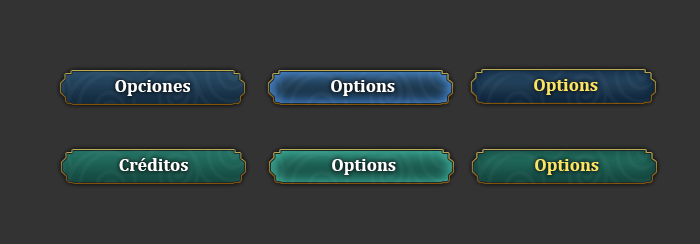
<style>
.page{position:relative;width:700px;height:244px;background:#333333}
.page>*{position:absolute;margin:0}
.t1{font:18px "Cambria-Bold";color:#ffffff}
.t2{font:18px "Cambria-Bold";color:#fbe463}
</style>
<div class="page">
<p class="t1" style="left:115px;top:80px;width:75px;height:16px">Opciones</p>
<p class="t1" style="left:331px;top:80px;width:64px;height:16px">Options</p>
<p class="t2" style="left:534px;top:79px;width:64px;height:16px">Options</p>
<p class="t1" style="left:119px;top:158px;width:69px;height:13px">Créditos</p>
<p class="t1" style="left:332px;top:159px;width:64px;height:16px">Options</p>
<p class="t2" style="left:535px;top:159px;width:64px;height:16px">Options</p>
</div>
